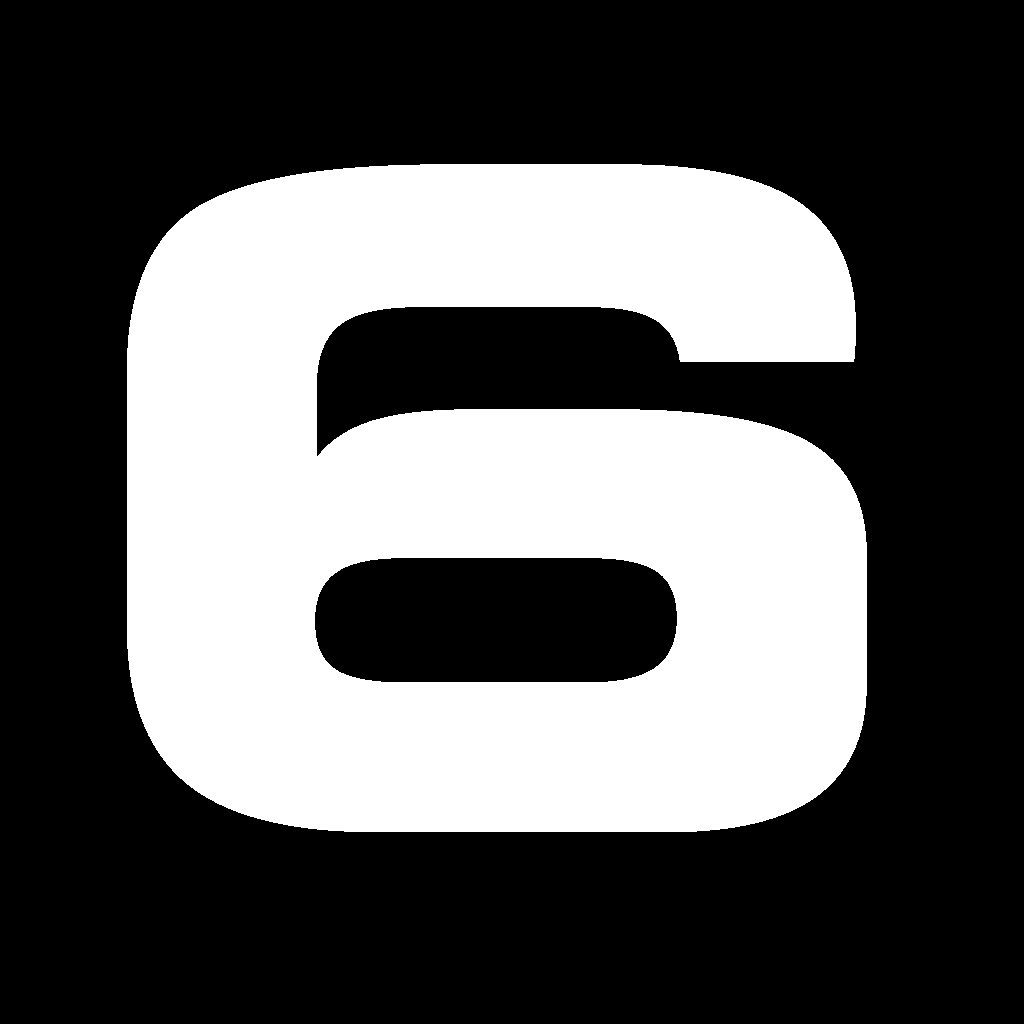
<style>
.page{position:relative;width:1024px;height:1024px;background:#000000}
.page>*{position:absolute;margin:0}
.t1{font:895.8px "Square721BT-BoldExtended";color:#ffffff}
</style>
<div class="page">
<p class="t1" style="left:127px;top:164px;width:740px;height:668px">6</p>
</div>
